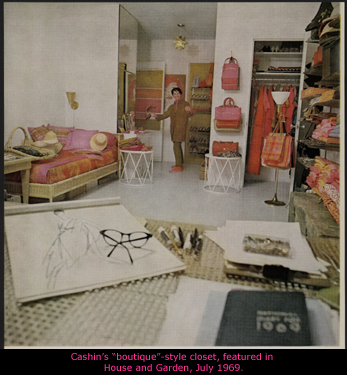
<style>
.page{position:relative;width:347px;height:375px}
.page>*{position:absolute;margin:0}
.t1{font:9.2px "Verdana";color:#ff3399}
</style>
<div class="page">
<p class="t1" style="left:71px;top:353px;width:202px;height:20px;text-align:center">Cashin’s “boutique”-style closet, featured in<br> House and Garden, July 1969.</p>
</div>
